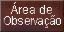
<style>
.page{position:relative;width:64px;height:32px}
.page>*{position:absolute;margin:0}
.t1{font:12px/11.3px "ArialMT";letter-spacing:-0.055em;color:#efefef;scale:1.04 1}
.t2{font:12px/11.3px "ArialMT";color:#efefef;scale:1.04 1}
.t3{font:12px/11.3px "ArialMT";letter-spacing:-0.055em;color:#efefef}
</style>
<div class="page">
<p class="t1" style="left:4px;top:2px;width:57px;height:26px;text-align:center"><span class="t2">Área de<br></span>Observaçã<span class="t3">o</span></p>
</div>
